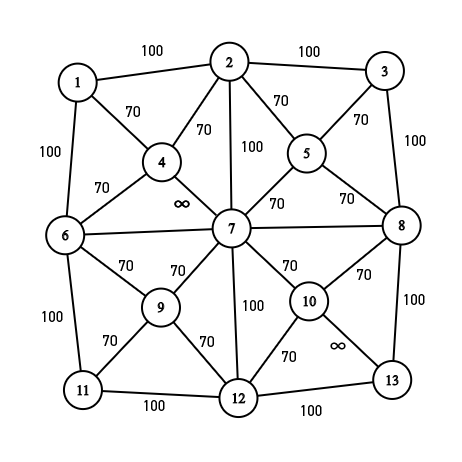
<style>
.page{position:relative;width:462px;height:462px;background:#ffffff}
.page>*{position:absolute;margin:0}
.t1{font:15px "DIN2014-Regular";color:#000000}
.t2{font:21px "DIN2014-Regular";color:#000000}
</style>
<div class="page">
<p class="t1" style="left:142px;top:45px;width:21px;height:11px">100</p>
<p class="t1" style="left:299px;top:46px;width:21px;height:11px">100</p>
<p class="t1" style="left:274px;top:95px;width:14px;height:11px">70</p>
<p class="t1" style="left:126px;top:106px;width:14px;height:11px">70</p>
<p class="t1" style="left:197px;top:124px;width:14px;height:11px">70</p>
<p class="t1" style="left:354px;top:114px;width:14px;height:11px">70</p>
<p class="t1" style="left:405px;top:135px;width:21px;height:11px">100</p>
<p class="t1" style="left:40px;top:146px;width:21px;height:11px">100</p>
<p class="t1" style="left:242px;top:141px;width:21px;height:11px">100</p>
<p class="t1" style="left:95px;top:182px;width:14px;height:11px">70</p>
<p class="t1" style="left:270px;top:198px;width:14px;height:11px">70</p>
<p class="t1" style="left:340px;top:193px;width:14px;height:11px">70</p>
<p class="t2" style="left:174px;top:200px;width:16px;height:8px">∞</p>
<p class="t2" style="left:174px;top:200px;width:16px;height:8px">∞</p>
<p class="t1" style="left:119px;top:260px;width:14px;height:11px">70</p>
<p class="t1" style="left:171px;top:265px;width:14px;height:11px">70</p>
<p class="t1" style="left:283px;top:260px;width:14px;height:11px">70</p>
<p class="t1" style="left:357px;top:269px;width:14px;height:11px">70</p>
<p class="t1" style="left:404px;top:294px;width:21px;height:11px">100</p>
<p class="t1" style="left:243px;top:300px;width:21px;height:11px">100</p>
<p class="t1" style="left:42px;top:311px;width:21px;height:11px">100</p>
<p class="t1" style="left:103px;top:335px;width:14px;height:11px">70</p>
<p class="t1" style="left:200px;top:336px;width:14px;height:11px">70</p>
<p class="t2" style="left:330px;top:342px;width:16px;height:8px">∞</p>
<p class="t1" style="left:282px;top:351px;width:14px;height:11px">70</p>
<p class="t1" style="left:144px;top:400px;width:21px;height:11px">100</p>
<p class="t1" style="left:301px;top:405px;width:21px;height:11px">100</p>
</div>
